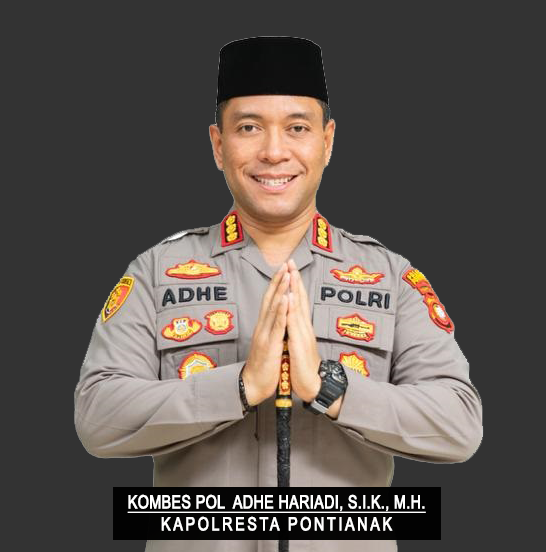
<style>
.page{position:relative;width:546px;height:552px;background:#333333}
.page>*{position:absolute;margin:0}
.t1{font:18.3px "ArialMT";color:#ffffff;font-weight:bold;text-decoration:underline;scale:0.78 1}
.t2{font:18.3px "ArialMT";letter-spacing:0.16em;color:#ffffff;font-weight:bold;scale:0.78 1}
</style>
<div class="page">
<p class="t1" style="left:127px;top:494px;width:299px;height:37px;text-align:center">KOMBES POL  ADHE HARIADI, S.I.K., M.H.<br><span class="t2">KAPOLRESTA PONTIANAK</span></p>
</div>
